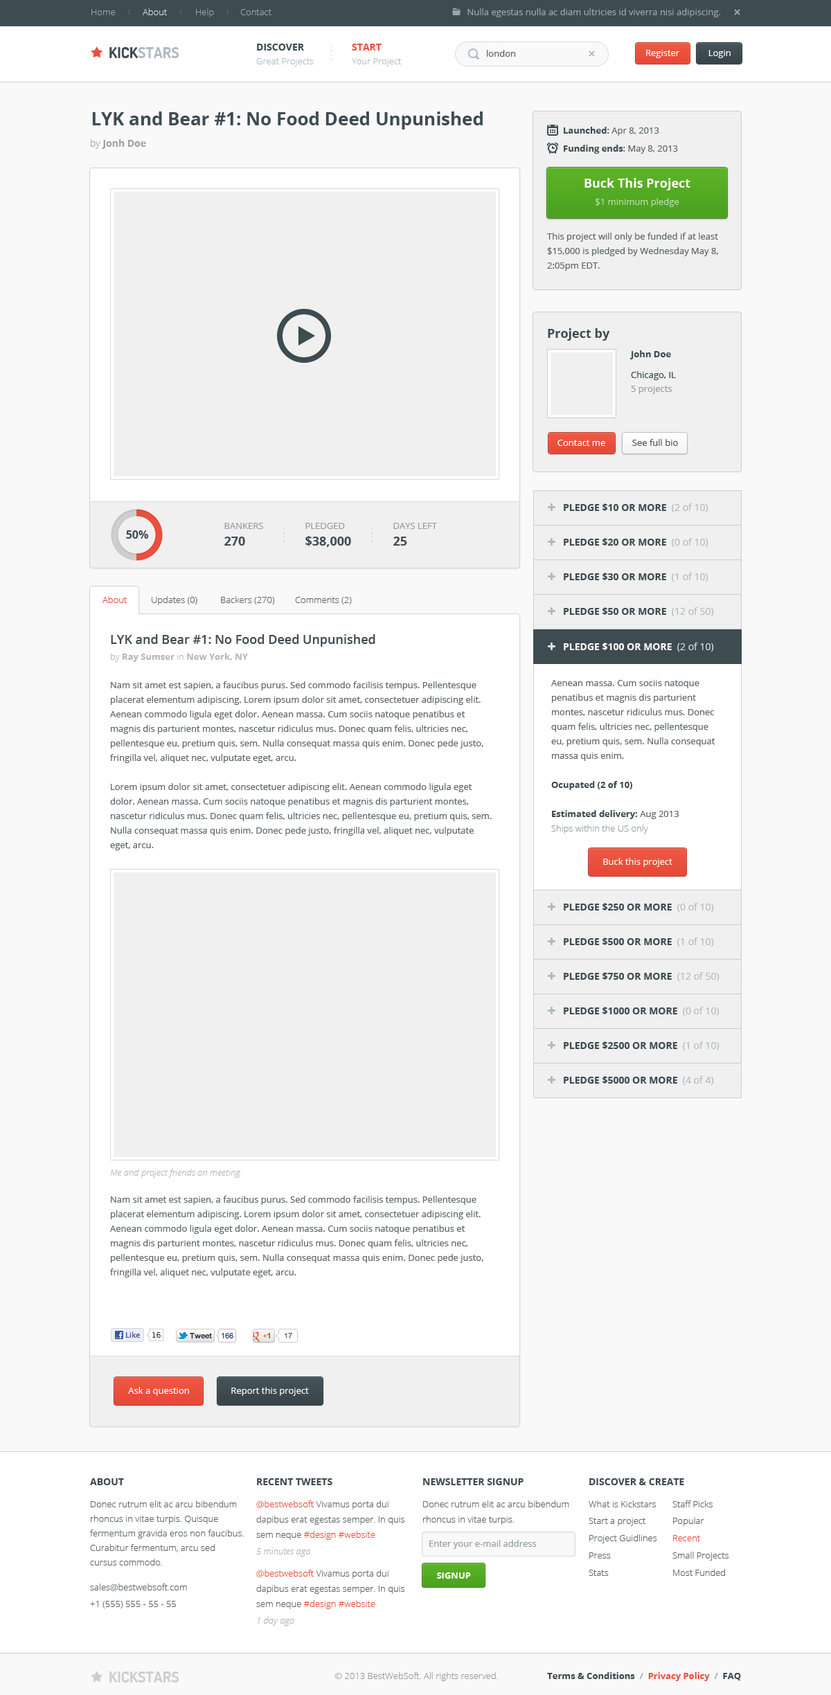
<style>
.page{position:relative;width:831px;height:1695px;background:#f9f9f9}
.page>*{position:absolute;margin:0}
.t1{font:9px "OpenSans-Light";color:#9fa5a8}
.t2{font:9px "OpenSans-Light";color:#d8dbdc}
.t3{font:9px "OpenSans";color:#9fa5a8}
.t4{font:15.2px "Dosis-Bold";color:#afbbc1;text-transform:uppercase}
.t5{font:15.2px "Dosis-Bold";color:#3e4b51;text-transform:uppercase}
.t6{font:9.7px "OpenSans-Bold";color:#3e4b51;text-transform:uppercase}
.t7{font:9.7px "OpenSans-Bold";color:#ea503d;text-transform:uppercase}
.t8{font:9px "OpenSans";color:#5c666b}
.t9{font:9px "OpenSans";color:#ffffff}
.t10{font:9px "OpenSans-Light";color:#afbbc1}
.t11{font:18px "OpenSans-Bold";color:#3e4b51}
.t12{font:9px "OpenSans-Bold";color:#3e4b51}
.t13{font:9px "OpenSans";color:#3e4b51}
.t14{font:9.7px "OpenSans-Bold";color:#9ba2a5}
.t15{font:9.7px "OpenSans-Light";color:#9ba2a5}
.t16{font:12.5px "OpenSans-Bold";color:#ffffff}
.t17{font:9px "OpenSans";color:#b9dba6}
.t18{font:9px/14.5px "OpenSans";color:#5c666b}
.t19{font:12.5px "OpenSans-Bold";color:#3e4b51}
.t20{font:9px "OpenSans";color:#979da0}
.t21{font:9px "OpenSans";color:#575757}
.t22{font:9.7px "OpenSans";color:#afbbc1}
.t23{font:11.1px "OpenSans-Bold";color:#3e4b51}
.t24{font:9px "OpenSans";color:#979da0;text-transform:uppercase}
.t25{font:9px "OpenSans-Light";color:#ea503d}
.t26{font:9px "OpenSans-Light";color:#5c666b}
.t27{font:12.5px "OpenSans-Semibold";color:#3e4b51}
.t28{font:9px "OpenSans-Bold";color:#b2b7b9}
.t29{font:9px "OpenSans-Light";color:#b2b7b9}
.t30{font:9.7px "OpenSans-Bold";color:#ffffff;text-transform:uppercase}
.t31{font:9.7px "OpenSans";color:#dbe3e7}
.t32{font:9px/14.5px "OpenSans-Bold";color:#3e4b51}
.t33{font:9px/14.5px "OpenSans-Light";color:#979da0}
.t34{font:9px "OpenSansLight-Italic";color:#b2b7b9}
.t35{font:9.7px "OpenSans-Bold";color:#3e4a51;text-transform:uppercase}
.t36{font:9px/14.5px "OpenSans-Light";color:#5c666b}
.t37{font:9px/15.2px "OpenSans-Light";color:#5c666b}
.t38{font:9px/15.2px "OpenSans-Light";color:#ea503d}
.t39{font:9px "OpenSans";color:#909da3}
.t40{font:9px "OpenSansLight-Italic";color:#adb2b5}
.t41{font:9px "OpenSans-Bold";color:#ffffff;text-transform:uppercase}
.t42{font:15.2px "Dosis-Bold";color:#cecece;text-transform:uppercase}
.t43{font:9px "OpenSans-Light";color:#999999}
.t44{font:9px "OpenSans-Bold";color:#3e4a51}
.t45{font:9px "OpenSans-Bold";color:#aeaeae}
.t46{font:9px "OpenSans-Bold";color:#ea503d}
</style>
<div class="page">
<p class="t1" style="left:91px;top:9px;width:24px;height:6px">Home</p>
<p class="t2" style="left:143px;top:8px;width:24px;height:7px">About</p>
<p class="t1" style="left:196px;top:8px;width:18px;height:9px">Help</p>
<p class="t1" style="left:240px;top:9px;width:31px;height:6px">Contact</p>
<p class="t3" style="left:467px;top:8px;width:254px;height:9px">Nulla egestas nulla ac diam ultricies id viverra nisi adipiscing.</p>
<p class="t4" style="left:109px;top:47px;width:70px;height:11px"><span class="t5">Kick</span>stars</p>
<p class="t6" style="left:257px;top:44px;width:47px;height:7px">Discover</p>
<p class="t7" style="left:352px;top:44px;width:29px;height:7px">Start</p>
<p class="t8" style="left:487px;top:50px;width:29px;height:7px">london</p>
<p class="t9" style="left:646px;top:50px;width:33px;height:8px">Register</p>
<p class="t9" style="left:708px;top:50px;width:22px;height:8px">Login</p>
<p class="t10" style="left:256px;top:58px;width:58px;height:8px">Great Projects</p>
<p class="t10" style="left:352px;top:58px;width:50px;height:8px">Your Project</p>
<p class="t11" style="left:92px;top:111px;width:391px;height:18px">LYK and Bear #1: No Food Deed Unpunished</p>
<p class="t8" style="left:564px;top:127px;width:95px;height:9px"><span class="t12">Launched</span><span class="t13">:</span> Apr 8, 2013</p>
<p class="t14" style="left:91px;top:139px;width:55px;height:10px"><span class="t15">by </span>Jonh Doe</p>
<p class="t12" style="left:564px;top:145px;width:114px;height:9px">Funding ends<span class="t13">:</span><span class="t8"> May 8, 2013</span></p>
<p class="t16" style="left:584px;top:178px;width:106px;height:12px">Buck This Project</p>
<p class="t17" style="left:595px;top:198px;width:84px;height:9px">$1 minimum pledge</p>
<p class="t18" style="left:547px;top:233px;width:171px;height:38px">This project will only be funded if at least $15,000 is pledged by Wednesday May 8, 2:05pm EDT.</p>
<p class="t19" style="left:548px;top:328px;width:62px;height:13px">Project by</p>
<p class="t12" style="left:629px;top:350px;width:42px;height:9px">John Doe</p>
<p class="t13" style="left:631px;top:371px;width:45px;height:9px">Chicago, IL</p>
<p class="t20" style="left:631px;top:386px;width:41px;height:8px">5 projects</p>
<p class="t9" style="left:557px;top:440px;width:48px;height:6px">Contact me</p>
<p class="t21" style="left:632px;top:439px;width:46px;height:7px">See full bio</p>
<p class="t6" style="left:564px;top:503px;width:144px;height:9px">Pledge $10 or more <span class="t22"> (2 of 10)</span></p>
<p class="t23" style="left:126px;top:530px;width:22px;height:9px">50%</p>
<p class="t24" style="left:224px;top:523px;width:39px;height:6px">Bankers</p>
<p class="t24" style="left:305px;top:523px;width:40px;height:6px">Pledged</p>
<p class="t24" style="left:393px;top:523px;width:44px;height:6px">Days Left</p>
<p class="t19" style="left:224px;top:537px;width:21px;height:9px">270</p>
<p class="t19" style="left:305px;top:536px;width:46px;height:11px">$38,000</p>
<p class="t19" style="left:393px;top:537px;width:14px;height:9px">25</p>
<p class="t6" style="left:564px;top:538px;width:144px;height:9px">Pledge $20 or more <span class="t22"> (0 of 10)</span></p>
<p class="t6" style="left:564px;top:573px;width:144px;height:9px">Pledge $30 or more <span class="t22"> (1 of 10)</span></p>
<p class="t25" style="left:102px;top:596px;width:25px;height:7px">About</p>
<p class="t26" style="left:152px;top:596px;width:45px;height:9px">Updates (0)</p>
<p class="t26" style="left:221px;top:596px;width:54px;height:8px">Backers (270)</p>
<p class="t26" style="left:295px;top:597px;width:57px;height:7px">Comments (2)</p>
<p class="t6" style="left:564px;top:607px;width:150px;height:9px">Pledge $50 or more <span class="t22"> (12 of 50)</span></p>
<p class="t27" style="left:111px;top:634px;width:264px;height:13px">LYK and Bear #1: No Food Deed Unpunished</p>
<p class="t28" style="left:111px;top:653px;width:137px;height:9px"><span class="t29">by </span>Ray Sumser<span class="t29"> in </span>New York, NY</p>
<p class="t30" style="left:564px;top:642px;width:150px;height:9px">Pledge $100 or more  <span class="t31">(2 of 10)</span></p>
<p class="t18" style="left:110px;top:681px;width:382px;height:169px">Nam sit amet est sapien, a faucibus purus. Sed commodo facilisis tempus. Pellentesque placerat elementum adipiscing. Lorem ipsum dolor sit amet, consectetuer adipiscing elit. Aenean commodo ligula eget dolor. Aenean massa. Cum sociis natoque penatibus et magnis dis parturient montes, nascetur ridiculus mus. Donec quam felis, ultricies nec, pellentesque eu, pretium quis, sem. Nulla consequat massa quis enim. Donec pede justo, fringilla vel, aliquet nec, vulputate eget, arcu.<br><br>Lorem ipsum dolor sit amet, consectetuer adipiscing elit. Aenean commodo ligula eget dolor. Aenean massa. Cum sociis natoque penatibus et magnis dis parturient montes, nascetur ridiculus mus. Donec quam felis, ultricies nec, pellentesque eu, pretium quis, sem. Nulla consequat massa quis enim. Donec pede justo, fringilla vel, aliquet nec, vulputate eget, arcu.</p>
<p class="t18" style="left:551px;top:680px;width:164px;height:154px">Aenean massa. Cum sociis natoque penatibus et magnis dis parturient montes, nascetur ridiculus mus. Donec quam felis, ultricies nec, pellentesque eu, pretium quis, sem. Nulla consequat massa quis enim.<br><br><span class="t32">Ocupated (2 of 10)<br><br>Estimated delivery:</span> Aug 2013<br><span class="t33">Ships within the US only</span></p>
<p class="t9" style="left:603px;top:858px;width:69px;height:9px">Buck this project</p>
<p class="t6" style="left:564px;top:903px;width:150px;height:9px">Pledge $250 or more <span class="t22"> (0 of 10)</span></p>
<p class="t6" style="left:564px;top:937px;width:150px;height:9px">Pledge $500 or more <span class="t22"> (1 of 10)</span></p>
<p class="t6" style="left:564px;top:972px;width:155px;height:9px">Pledge $750 or more <span class="t22"> (12 of 50)</span></p>
<p class="t6" style="left:564px;top:1007px;width:155px;height:9px">Pledge $1000 or more <span class="t22"> (0 of 10)</span></p>
<p class="t6" style="left:564px;top:1041px;width:155px;height:9px">Pledge $2500 or more <span class="t22"> (1 of 10)</span></p>
<p class="t6" style="left:564px;top:1076px;width:150px;height:9px">Pledge $5000 or more <span class="t22"> (4 of 4)</span></p>
<p class="t34" style="left:110px;top:1169px;width:131px;height:9px">Me and project friends on meeting</p>
<p class="t18" style="left:110px;top:1196px;width:373px;height:81px">Nam sit amet est sapien, a faucibus purus. Sed commodo facilisis tempus. Pellentesque placerat elementum adipiscing. Lorem ipsum dolor sit amet, consectetuer adipiscing elit. Aenean commodo ligula eget dolor. Aenean massa. Cum sociis natoque penatibus et magnis dis parturient montes, nascetur ridiculus mus. Donec quam felis, ultricies nec, pellentesque eu, pretium quis, sem. Nulla consequat massa quis enim. Donec pede justo, fringilla vel, aliquet nec, vulputate eget, arcu.</p>
<p class="t9" style="left:128px;top:1387px;width:61px;height:9px">Ask a question</p>
<p class="t9" style="left:231px;top:1387px;width:78px;height:9px">Report this project</p>
<p class="t35" style="left:90px;top:1478px;width:34px;height:7px">About</p>
<p class="t35" style="left:257px;top:1478px;width:75px;height:7px">Recent Tweets</p>
<p class="t35" style="left:423px;top:1478px;width:100px;height:7px">Newsletter Signup</p>
<p class="t35" style="left:589px;top:1478px;width:95px;height:7px">Discover &amp; Create</p>
<p class="t36" style="left:90px;top:1500px;width:154px;height:65px">Donec rutrum elit ac arcu bibendum rhoncus in vitae turpis. Quisque fermentum gravida eros non faucibus. Curabitur fermentum, arcu sed cursus commodo.</p>
<p class="t37" style="left:256px;top:1500px;width:148px;height:40px"><span class="t38">@bestwebsoft</span> Vivamus porta dui dapibus erat egestas semper. In quis sem neque <span class="t38">#design #website</span></p>
<p class="t37" style="left:423px;top:1500px;width:146px;height:24px">Donec rutrum elit ac arcu bibendum rhoncus in vitae turpis.</p>
<p class="t26" style="left:588px;top:1500px;width:68px;height:7px">What is Kickstars</p>
<p class="t26" style="left:672px;top:1500px;width:40px;height:7px">Staff Picks</p>
<p class="t26" style="left:588px;top:1518px;width:58px;height:8px">Start a project</p>
<p class="t26" style="left:673px;top:1517px;width:31px;height:9px">Popular</p>
<p class="t39" style="left:429px;top:1540px;width:108px;height:9px">Enter your e-mail address</p>
<p class="t26" style="left:589px;top:1534px;width:68px;height:9px">Project Guidlines</p>
<p class="t25" style="left:673px;top:1535px;width:27px;height:6px">Recent</p>
<p class="t40" style="left:256px;top:1547px;width:55px;height:9px">5 minutes ago</p>
<p class="t26" style="left:589px;top:1552px;width:22px;height:6px">Press</p>
<p class="t26" style="left:672px;top:1551px;width:56px;height:9px">Small Projects</p>
<p class="t37" style="left:256px;top:1569px;width:148px;height:40px"><span class="t38">@bestwebsoft </span>Vivamus porta dui dapibus erat egestas semper. In quis sem neque <span class="t38">#design #website</span></p>
<p class="t41" style="left:437px;top:1572px;width:34px;height:6px">Signup</p>
<p class="t26" style="left:588px;top:1569px;width:21px;height:7px">Stats</p>
<p class="t26" style="left:673px;top:1569px;width:52px;height:7px">Most Funded</p>
<p class="t26" style="left:90px;top:1583px;width:97px;height:8px">sales@bestwebsoft.com</p>
<p class="t26" style="left:90px;top:1601px;width:86px;height:7px">+1 (555) 555 - 55 - 55</p>
<p class="t40" style="left:258px;top:1617px;width:36px;height:9px">1 day ago</p>
<p class="t42" style="left:109px;top:1671px;width:70px;height:11px">Kickstars</p>
<p class="t43" style="left:334px;top:1672px;width:164px;height:9px">© 2013 BestWebSoft. All rights reserved.</p>
<p class="t44" style="left:547px;top:1672px;width:194px;height:9px">Terms &amp; Conditions <span class="t45"> /  </span><span class="t46">Privacy Policy  </span><span class="t45">/  </span>FAQ</p>
</div>
